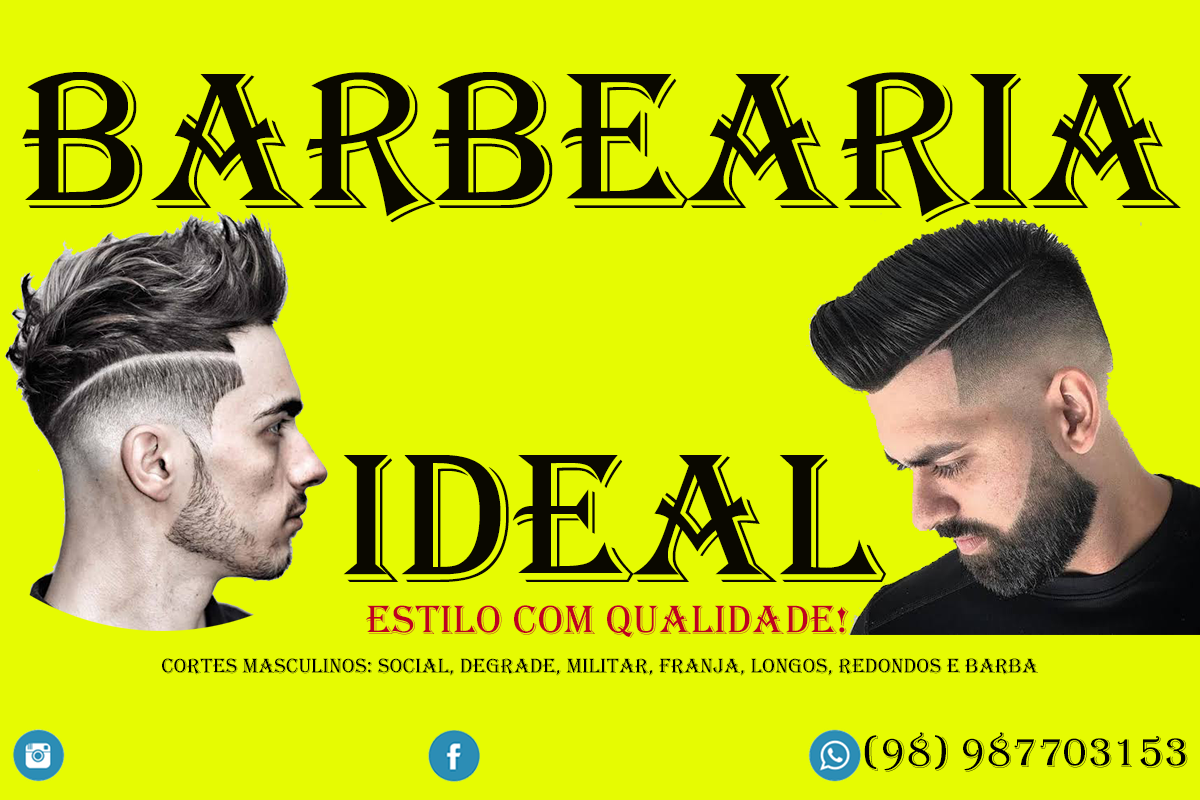
<style>
.page{position:relative;width:1200px;height:800px;background:#e6fb02}
.page>*{position:absolute;margin:0}
.t1{font:201.1px "Algerian";color:#0a0800}
.t2{font:190.5px "Algerian";color:#0a0800}
.t3{font:42.3px "Algerian";color:#bf0120}
.t4{font:21.2px "Algerian";color:#000000}
.t5{font:42.3px "Algerian";color:#000000}
</style>
<div class="page">
<p class="t1" style="left:22px;top:72px;width:1159px;height:151px">Barbearia</p>
<p class="t2" style="left:343px;top:455px;width:544px;height:127px">ideal</p>
<p class="t3" style="left:366px;top:605px;width:483px;height:33px">estilo com qualidade!</p>
<p class="t4" style="left:162px;top:658px;width:876px;height:18px">Cortes masculinos: social, degrade, militar, franja, longos, redondos e barba</p>
<p class="t5" style="left:864px;top:732px;width:324px;height:40px">(98) 987703153</p>
</div>
